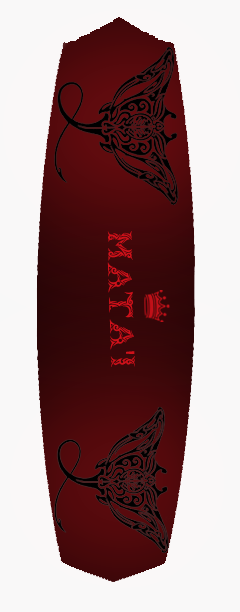
<style>
.page{position:relative;width:240px;height:612px;background:#f9f8f8}
.page>*{position:absolute;margin:0}
.t1{font:33.7px "Tribalcase";color:#cf111a}
.t2{font:33.7px "MyriadPro-Regular";color:#cf111a}
</style>
<div class="page">
<p class="t1" style="left:107px;top:231px;width:28px;height:136px;rotate:89deg">mata<span class="t2">'</span>i</p>
</div>
